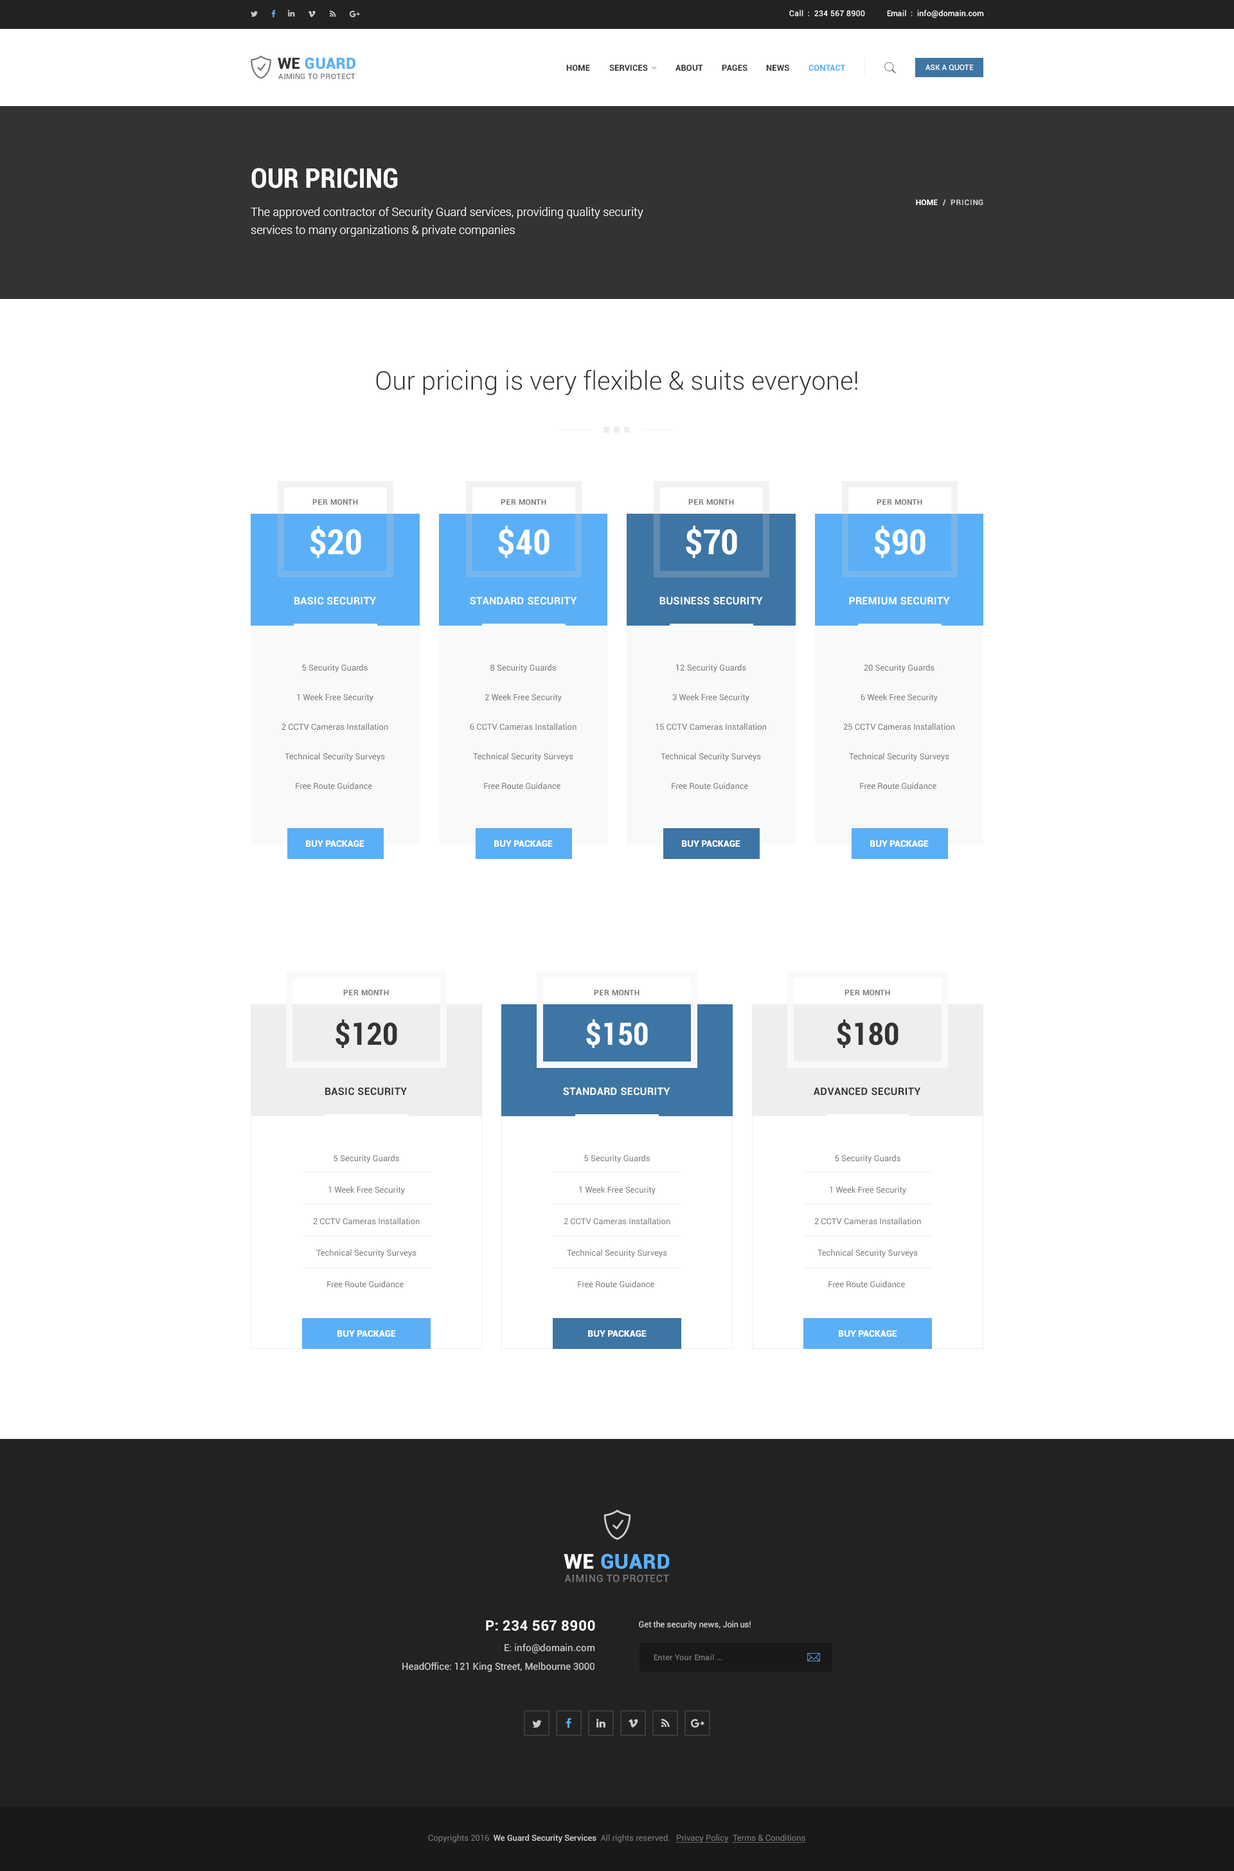
<style>
.page{position:relative;width:1234px;height:1871px;background:#ffffff}
.page>*{position:absolute;margin:0}
.t1{font:7.7px "Roboto-Regular";letter-spacing:0.025em;color:#ffffff}
.t2{font:15.4px "Roboto-Black";letter-spacing:0.025em;color:#5aaff7;text-transform:uppercase}
.t3{font:15.4px "Roboto-Black";letter-spacing:0.025em;color:#333333;text-transform:uppercase}
.t4{font:8.4px "Roboto-Bold";letter-spacing:0.01em;color:#333333;text-transform:uppercase}
.t5{font:8.4px "Roboto-Bold";letter-spacing:0.01em;color:#5aaff7;text-transform:uppercase}
.t6{font:7.7px "Roboto-Medium";color:#ffffff;text-transform:uppercase}
.t7{font:7.7px "Roboto-Medium";letter-spacing:0.035em;color:#777777;text-transform:uppercase}
.t8{font:28.3px "Roboto-BoldCondensed";color:#ffffff;text-transform:uppercase}
.t9{font:11.6px/18px "Roboto-Light";color:#ffffff}
.t10{font:7.7px "Roboto-Bold";letter-spacing:0.04em;color:#cccccc;text-transform:uppercase}
.t11{font:7.7px "Roboto-Bold";letter-spacing:0.04em;color:#ffffff;text-transform:uppercase}
.t12{font:25.7px "Roboto-Light";color:#333333}
.t13{font:7.7px "Roboto-Bold";letter-spacing:0.04em;color:#777777;text-transform:uppercase}
.t14{font:36px "Roboto-BoldCondensed";color:#ffffff;text-transform:uppercase}
.t15{font:10.3px "Roboto-Bold";letter-spacing:0.025em;color:#ffffff;text-transform:uppercase}
.t16{font:8.4px/29.6px "Roboto-Regular";color:#777777}
.t17{font:9px "Roboto-Black";color:#ffffff;text-transform:uppercase}
.t18{font:32.1px "Roboto-BoldCondensed";color:#333333;text-transform:uppercase}
.t19{font:32.1px "Roboto-BoldCondensed";color:#ffffff;text-transform:uppercase}
.t20{font:10.3px "Roboto-Bold";letter-spacing:0.025em;color:#333333;text-transform:uppercase}
.t21{font:8.4px/31.5px "Roboto-Regular";color:#777777}
.t22{font:20.6px "Roboto-Black";letter-spacing:0.025em;color:#5aaff7;text-transform:uppercase}
.t23{font:20.6px "Roboto-Black";letter-spacing:0.025em;color:#ffffff;text-transform:uppercase}
.t24{font:10.3px "Roboto-Medium";letter-spacing:0.035em;color:#777777;text-transform:uppercase}
.t25{font:14.1px "Roboto-Bold";letter-spacing:0.025em;color:#ffffff}
.t26{font:8.4px "Roboto-Regular";color:#cccccc}
.t27{font:9.6px "Roboto-Regular";color:#cccccc}
.t28{font:7.7px "Roboto-Regular";letter-spacing:0.04em;color:#777777}
.t29{font:8.4px "Roboto-Medium";color:#cccccc}
.t30{font:8.4px "Roboto-Regular";color:#777777}
.t31{font:8.4px "Roboto-Regular";color:#777777;text-decoration:underline}
</style>
<div class="page">
<p class="t1" style="left:789px;top:10px;width:76px;height:7px">Call  :  234 567 8900</p>
<p class="t1" style="left:887px;top:10px;width:97px;height:8px">Email  :  info@domain.com</p>
<p class="t2" style="left:278px;top:57px;width:78px;height:12px"><span class="t3">we </span>Guard</p>
<p class="t4" style="left:566px;top:64px;width:24px;height:7px">Home</p>
<p class="t4" style="left:609px;top:64px;width:39px;height:7px">Services</p>
<p class="t4" style="left:676px;top:64px;width:27px;height:7px">About</p>
<p class="t4" style="left:722px;top:64px;width:26px;height:7px">pages</p>
<p class="t4" style="left:766px;top:64px;width:23px;height:7px">news</p>
<p class="t5" style="left:809px;top:64px;width:37px;height:7px">Contact</p>
<p class="t6" style="left:926px;top:64px;width:48px;height:7px">ask a quote</p>
<p class="t7" style="left:278px;top:73px;width:78px;height:6px">aiming to protect</p>
<p class="t8" style="left:251px;top:168px;width:147px;height:20px">our pricing</p>
<p class="t9" style="left:251px;top:207px;width:393px;height:30px">The approved contractor of Security Guard services, providing quality security<br>services to many organizations &amp; private companies</p>
<p class="t10" style="left:916px;top:199px;width:68px;height:7px"><span class="t11">home</span>  /  pricing</p>
<p class="t12" style="left:376px;top:370px;width:482px;height:25px">Our pricing is very flexible &amp; suits everyone!</p>
<p class="t13" style="left:312px;top:499px;width:46px;height:6px">per month</p>
<p class="t13" style="left:501px;top:499px;width:45px;height:6px">per month</p>
<p class="t13" style="left:688px;top:499px;width:46px;height:6px">per month</p>
<p class="t13" style="left:877px;top:499px;width:46px;height:6px">per month</p>
<p class="t14" style="left:310px;top:525px;width:51px;height:33px">$20</p>
<p class="t14" style="left:498px;top:525px;width:52px;height:33px">$40</p>
<p class="t14" style="left:686px;top:525px;width:51px;height:33px">$70</p>
<p class="t14" style="left:874px;top:525px;width:52px;height:33px">$90</p>
<p class="t15" style="left:294px;top:597px;width:82px;height:8px">basic security</p>
<p class="t15" style="left:470px;top:597px;width:107px;height:8px">standard security</p>
<p class="t15" style="left:660px;top:597px;width:103px;height:8px">business security</p>
<p class="t15" style="left:849px;top:597px;width:101px;height:8px">premium security</p>
<p class="t16" style="left:282px;top:664px;width:106px;height:125px;text-align:center">5 Security Guards<br>1 Week Free Security<br>2 CCTV Cameras Installation<br>Technical Security Surveys<br>Free Route Guidance</p>
<p class="t16" style="left:470px;top:664px;width:107px;height:125px;text-align:center">8 Security Guards<br>2 Week Free Security<br>6 CCTV Cameras Installation<br>Technical Security Surveys<br>Free Route Guidance</p>
<p class="t16" style="left:656px;top:664px;width:110px;height:125px;text-align:center">12 Security Guards<br>3 Week Free Security<br>15 CCTV Cameras Installation<br>Technical Security Surveys<br>Free Route Guidance</p>
<p class="t16" style="left:844px;top:664px;width:111px;height:125px;text-align:center">20 Security Guards<br>6 Week Free Security<br>25 CCTV Cameras Installation<br>Technical Security Surveys<br>Free Route Guidance</p>
<p class="t17" style="left:306px;top:840px;width:58px;height:7px">buy package</p>
<p class="t17" style="left:494px;top:840px;width:59px;height:7px">buy package</p>
<p class="t17" style="left:682px;top:840px;width:59px;height:7px">buy package</p>
<p class="t17" style="left:870px;top:840px;width:59px;height:7px">buy package</p>
<p class="t13" style="left:343px;top:989px;width:46px;height:6px">per month</p>
<p class="t13" style="left:594px;top:989px;width:46px;height:6px">per month</p>
<p class="t13" style="left:845px;top:989px;width:45px;height:6px">per month</p>
<p class="t18" style="left:336px;top:1019px;width:61px;height:29px">$120</p>
<p class="t19" style="left:586px;top:1019px;width:62px;height:29px">$150</p>
<p class="t18" style="left:837px;top:1019px;width:62px;height:29px">$180</p>
<p class="t20" style="left:325px;top:1087px;width:82px;height:8px">basic security</p>
<p class="t15" style="left:563px;top:1087px;width:107px;height:8px">standard security</p>
<p class="t20" style="left:814px;top:1087px;width:107px;height:8px">advanced security</p>
<p class="t21" style="left:313px;top:1155px;width:107px;height:133px;text-align:center">5 Security Guards<br>1 Week Free Security<br>2 CCTV Cameras Installation<br>Technical Security Surveys<br>Free Route Guidance</p>
<p class="t21" style="left:564px;top:1155px;width:106px;height:133px;text-align:center">5 Security Guards<br>1 Week Free Security<br>2 CCTV Cameras Installation<br>Technical Security Surveys<br>Free Route Guidance</p>
<p class="t21" style="left:815px;top:1155px;width:106px;height:133px;text-align:center">5 Security Guards<br>1 Week Free Security<br>2 CCTV Cameras Installation<br>Technical Security Surveys<br>Free Route Guidance</p>
<p class="t17" style="left:338px;top:1330px;width:58px;height:6px">buy package</p>
<p class="t17" style="left:588px;top:1330px;width:59px;height:6px">buy package</p>
<p class="t17" style="left:839px;top:1330px;width:58px;height:6px">buy package</p>
<p class="t22" style="left:564px;top:1553px;width:106px;height:16px"><span class="t23">we </span>Guard</p>
<p class="t24" style="left:564px;top:1574px;width:105px;height:8px">aiming to protect</p>
<p class="t25" style="left:486px;top:1620px;width:109px;height:11px">P: 234 567 8900</p>
<p class="t26" style="left:639px;top:1620px;width:112px;height:9px">Get the security news, Join us!</p>
<p class="t27" style="left:505px;top:1643px;width:90px;height:10px">E: info@domain.com</p>
<p class="t27" style="left:402px;top:1662px;width:193px;height:10px">HeadOffice: 121 King Street, Melbourne 3000</p>
<p class="t28" style="left:654px;top:1653px;width:69px;height:8px">Enter Your Email ...</p>
<p class="t29" style="left:428px;top:1834px;width:242px;height:8px"><span class="t30">Copyrights 2016  </span>We Guard Security Services  <span class="t30">All rights reserved.</span></p>
<p class="t31" style="left:676px;top:1834px;width:130px;height:8px">Privacy Policy  Terms &amp; Conditions</p>
</div>
